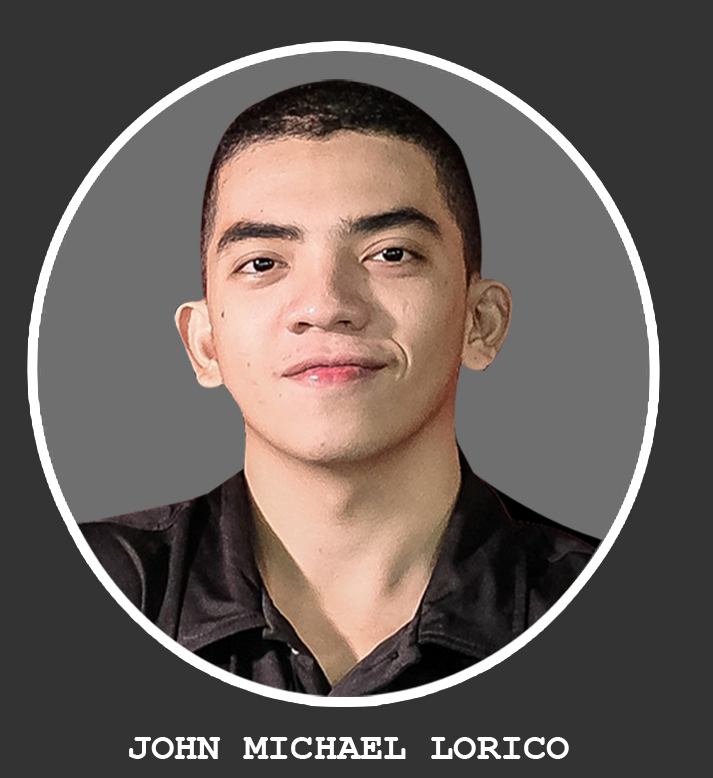
<style>
.page{position:relative;width:713px;height:778px;background:#333333}
.page>*{position:absolute;margin:0}
.t1{font:38.8px "CourierNewPS-BoldMT";color:#ffffff}
</style>
<div class="page">
<p class="t1" style="left:129px;top:737px;width:440px;height:22px">JOHN MICHAEL LORICO</p>
</div>
